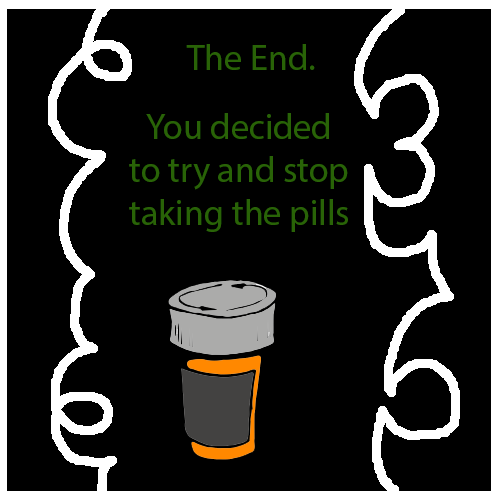
<style>
.page{position:relative;width:500px;height:500px;background:#000000}
.page>*{position:absolute;margin:0}
.t1{font:36px "MyriadPro-Regular";color:#296307}
</style>
<div class="page">
<p class="t1" style="left:186px;top:44px;width:129px;height:26px">The End.</p>
<p class="t1" style="left:129px;top:113px;width:219px;height:119px;text-align:center">You decided to try and stop taking the pills</p>
</div>
